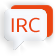
<style>
.page{position:relative;width:56px;height:56px}
.page>*{position:absolute;margin:0}
.t1{font:20.1px "Ubuntu";color:#eb4512}
</style>
<div class="page">
<p class="t1" style="left:11px;top:17px;width:29px;height:16px">IRC</p>
</div>
